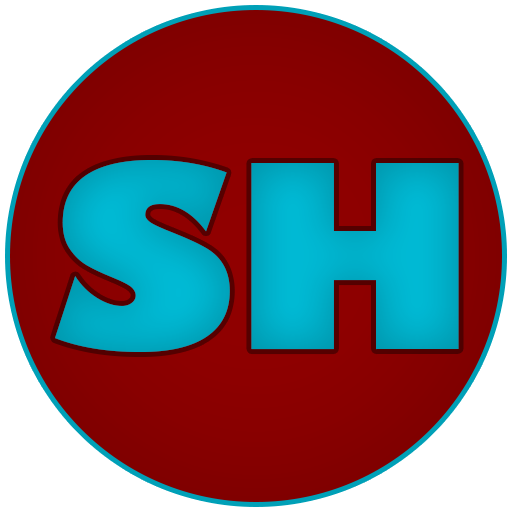
<style>
.page{position:relative;width:512px;height:512px;background:#ffffff}
.page>*{position:absolute;margin:0}
.t1{font:250px "GillSans-UltraBold";color:#00aec8}
</style>
<div class="page">
<p class="t1" style="left:55px;top:160px;width:404px;height:192px">SH</p>
</div>
